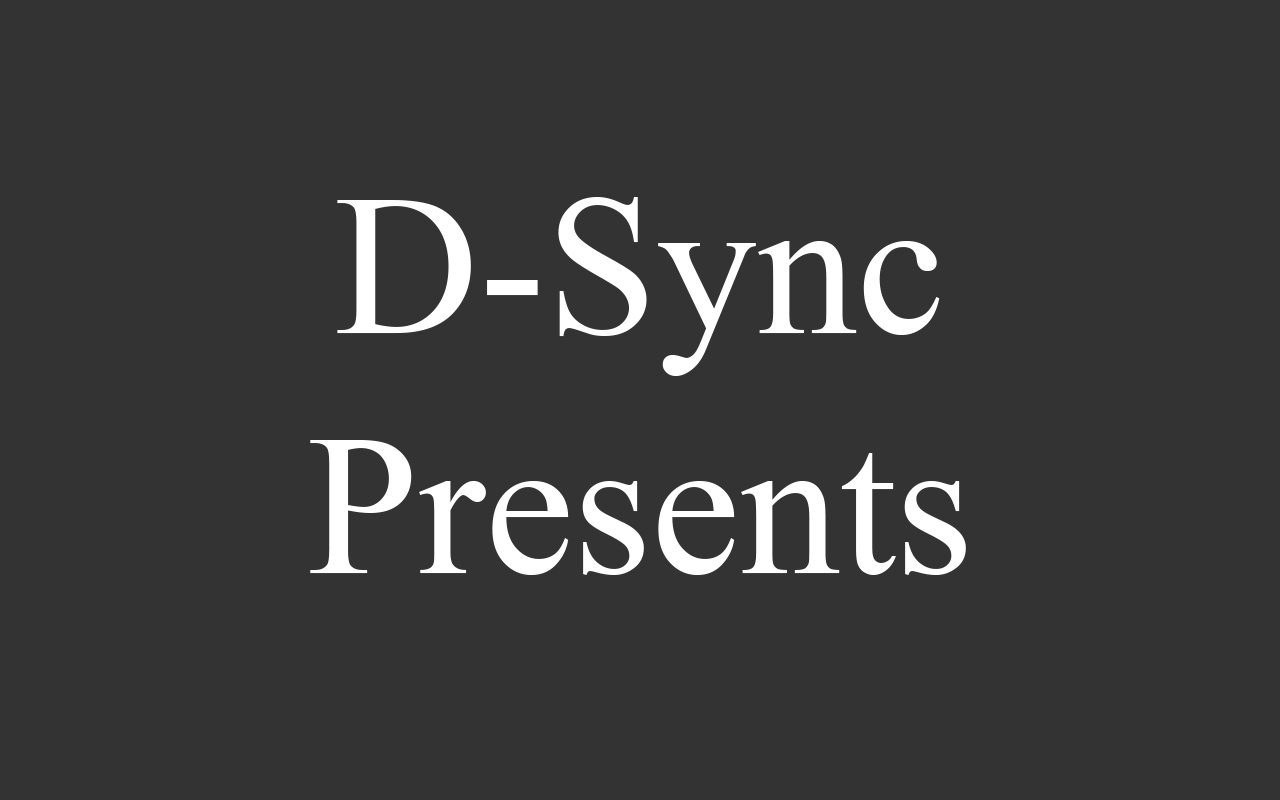
<style>
.page{position:relative;width:1280px;height:800px;background:#333333}
.page>*{position:absolute;margin:0}
.t1{font:200px "IskoolaPota";color:#ffffff}
</style>
<div class="page">
<p class="t1" style="left:310px;top:197px;width:656px;height:378px;text-align:center">D-Sync<br>Presents</p>
</div>
